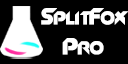
<style>
.page{position:relative;width:128px;height:64px;background:#000000}
.page>*{position:absolute;margin:0}
.t1{font:24.9px "Slant";color:#ffffff}
</style>
<div class="page">
<p class="t1" style="left:41px;top:8px;width:88px;height:47px;text-align:center">SplitFox<br>Pro</p>
</div>
